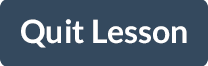
<style>
.page{position:relative;width:208px;height:66px;background:#34495e}
.page>*{position:absolute;margin:0}
.t1{font:32px "Lato-Bold";color:#ffffff}
</style>
<div class="page">
<p class="t1" style="left:21px;top:19px;width:166px;height:29px;opacity:0.75">Quit Lesson</p>
<p class="t1" style="left:21px;top:19px;width:166px;height:29px">Quit Lesson</p>
</div>
